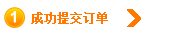
<style>
.page{position:relative;width:173px;height:37px;background:#ffffff}
.page>*{position:absolute;margin:0}
.t1{font:16px "Arial-BoldMT";color:#ffffff}
.t2{font:12px "SimSun";color:#ff7800;font-weight:bold}
</style>
<div class="page">
<p class="t1" style="left:11px;top:11px;width:5px;height:12px">1</p>
<p class="t2" style="left:31px;top:12px;width:77px;height:12px">成功提交订单</p>
</div>
